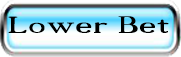
<style>
.page{position:relative;width:181px;height:57px}
.page>*{position:absolute;margin:0}
.t1{font:33px "18thCentury";color:#000000;scale:1.42 1}
</style>
<div class="page">
<p class="t1" style="left:8px;top:16px;width:161px;height:17px">Lower Bet</p>
</div>
